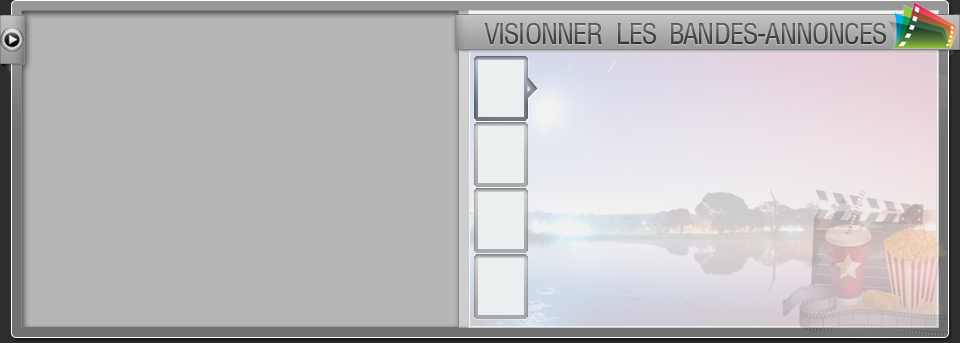
<style>
.page{position:relative;width:960px;height:343px;background:#b7b5b5}
.page>*{position:absolute;margin:0}
.t1{font:32px "Helvetica-Condensed-Thin";letter-spacing:-0.05em;color:#4d4d4d}
</style>
<div class="page">
<p class="t1" style="left:484px;top:23px;width:402px;height:21px">VISIONNER LES BANDES-ANNONCES</p>
</div>
